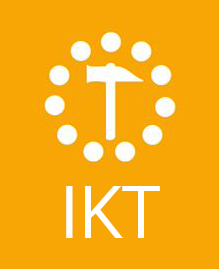
<style>
.page{position:relative;width:219px;height:269px;background:#f8a605}
.page>*{position:absolute;margin:0}
.t1{font:70.9px "Oxygen-Regular";color:#ffffff}
</style>
<div class="page">
<p class="t1" style="left:66px;top:186px;width:94px;height:52px">IKT</p>
</div>
